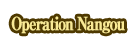
<style>
.page{position:relative;width:136px;height:49px;background:#ffffff}
.page>*{position:absolute;margin:0}
.t1{font:18px "RyuminPro-ExBold";letter-spacing:-0.08em;color:#f9ea94;font-weight:bold;scale:0.8 1}
</style>
<div class="page">
<p class="t1" style="left:11px;top:16px;width:114px;height:18px">Operation Nangou</p>
</div>
